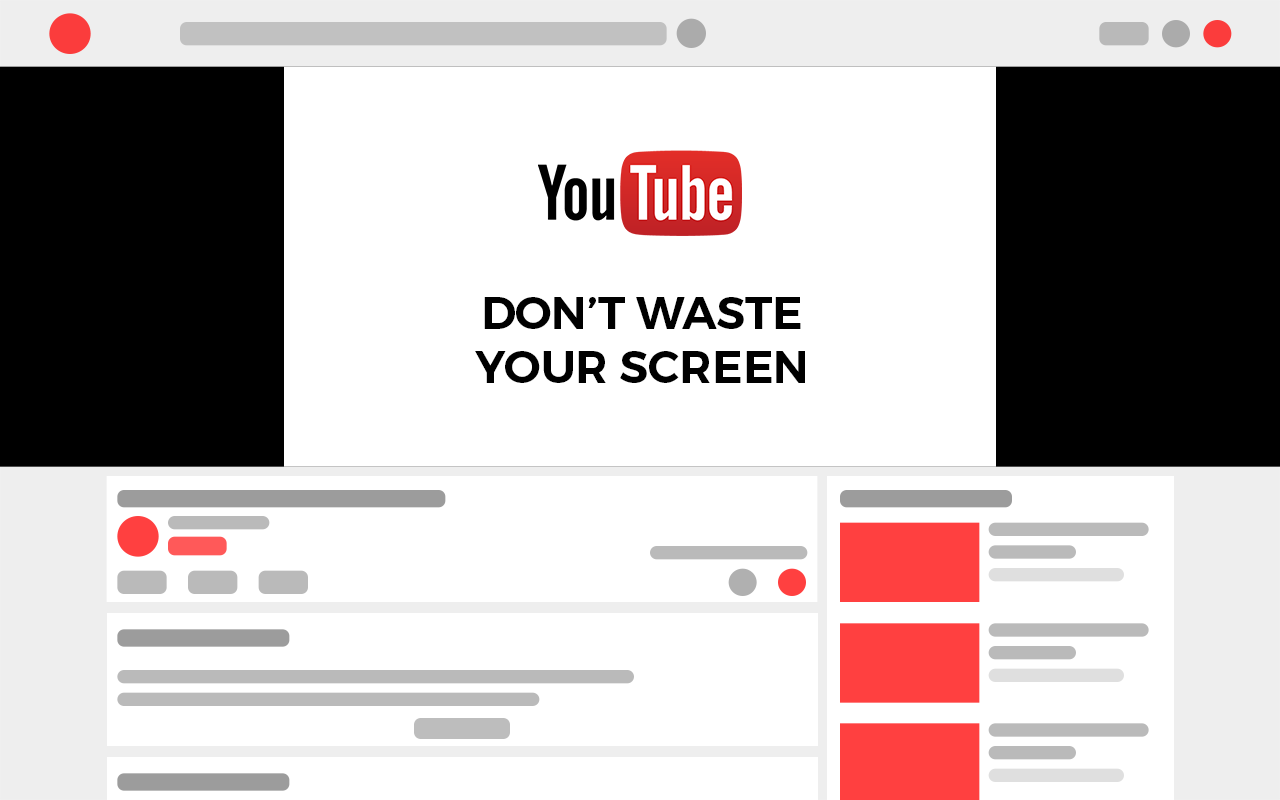
<style>
.page{position:relative;width:1280px;height:800px;background:#ffffff}
.page>*{position:absolute;margin:0}
.t1{font:45.4px "Montserrat-SemiBold";color:#000000;text-transform:uppercase}
</style>
<div class="page">
<p class="t1" style="left:475px;top:297px;width:330px;height:86px;text-align:center">Don’t waste<br>your screen</p>
</div>
